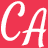
<style>
.page{position:relative;width:48px;height:48px;background:#ef3550}
.page>*{position:absolute;margin:0}
.t1{font:43px "Satisfy";letter-spacing:-0.025em;color:#ffffff}
.t2{font:41px "Satisfy";letter-spacing:-0.025em;color:#ffffff}
</style>
<div class="page">
<p class="t1" style="left:1px;top:1px;width:24px;height:40px">C</p>
<p class="t2" style="left:21px;top:7px;width:26px;height:41px">A</p>
</div>
